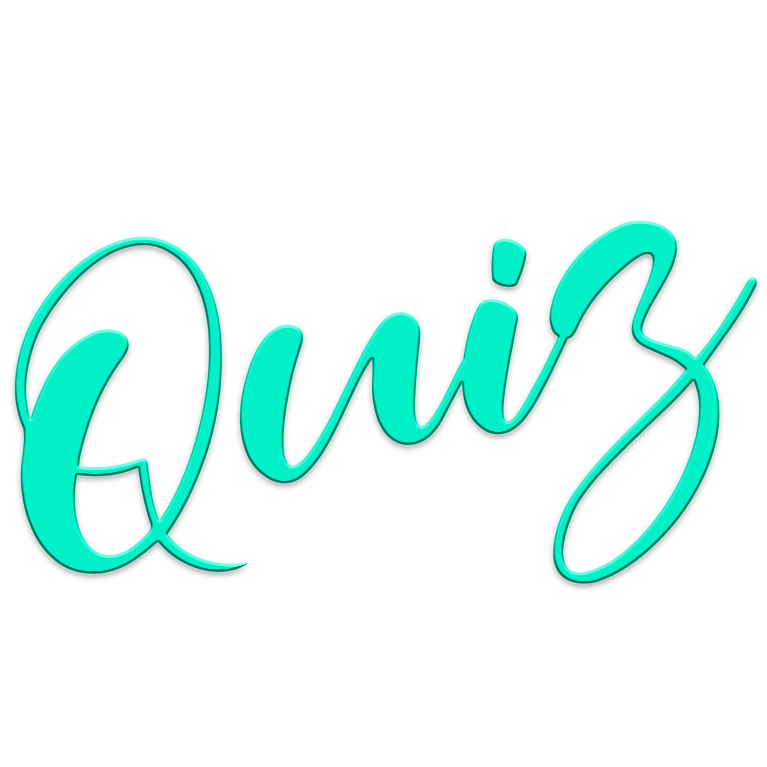
<style>
.page{position:relative;width:767px;height:767px;background:#ffffff}
.page>*{position:absolute;margin:0}
.t1{font:407px "Real-Miami";color:#02f0c7}
</style>
<div class="page">
<p class="t1" style="left:14px;top:221px;width:743px;height:363px;rotate:-16deg">Quiz</p>
</div>
